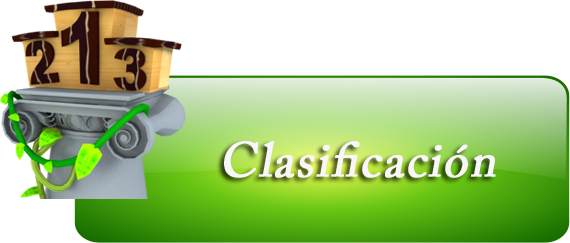
<style>
.page{position:relative;width:570px;height:243px;background:#ffffff}
.page>*{position:absolute;margin:0}
.t1{font:48px "ACaslonPro-Regular";letter-spacing:0.02em;color:#f9f6f9;font-weight:bold;font-style:italic}
</style>
<div class="page">
<p class="t1" style="left:224px;top:141px;width:272px;height:37px">Clasificación</p>
</div>
